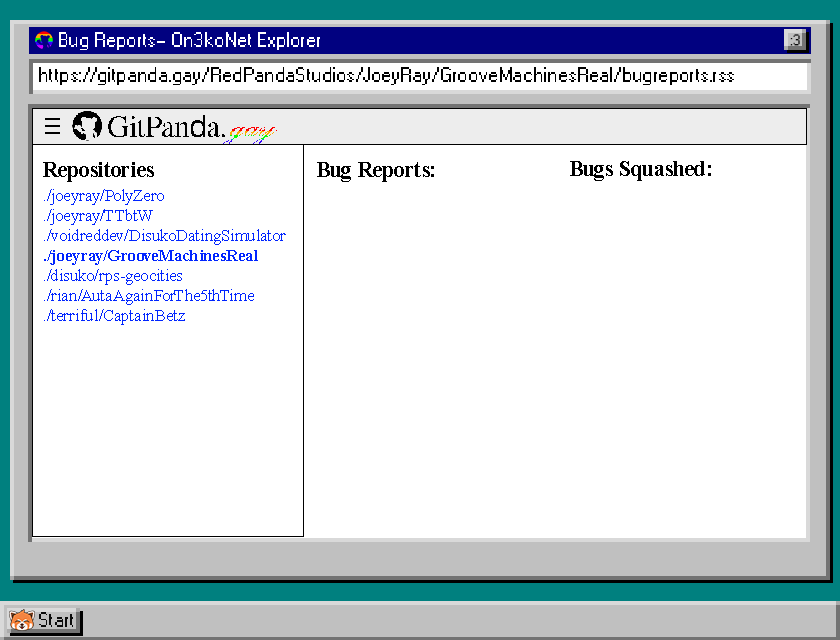
<style>
.page{position:relative;width:840px;height:640px;background:#ffffff}
.page>*{position:absolute;margin:0}
.t1{font:20.8px "W95FARegular";color:#ffffff}
.t2{font:15.1px "W95FARegular";color:#0b0b0b}
.t3{font:20.8px "W95FARegular";color:#000000}
.t4{font:21.7px "TimesNewRomanPS-BoldMT";color:#000000}
.t5{font:16.7px "TimesNewRomanPSMT";color:#0024ff}
.t6{font:16.7px "TimesNewRomanPS-BoldMT";color:#0024ff}
.t7{font:20.8px "W95FARegular";color:#0b0b0b}
</style>
<div class="page">
<p class="t1" style="left:59px;top:32px;width:261px;height:18px">Bug Reports- On3koNet Explorer</p>
<p class="t2" style="left:790px;top:34px;width:10px;height:12px">:3</p>
<p class="t3" style="left:39px;top:67px;width:695px;height:18px">https://gitpanda.gay/RedPandaStudios/JoeyRay/GrooveMachinesReal/bugreports.rss</p>
<p class="t4" style="left:570px;top:161px;width:141px;height:20px">Bugs Squashed:</p>
<p class="t4" style="left:43px;top:162px;width:111px;height:20px">Repositories</p>
<p class="t4" style="left:317px;top:162px;width:117px;height:20px">Bug Reports:</p>
<p class="t5" style="left:44px;top:189px;width:242px;height:136px">./joeyray/PolyZero<br>./joeyray/TTbtW<br>./voidreddev/DisukoDatingSimulator<br><span class="t6">./joeyray/GrooveMachinesReal<br></span>./disuko/rps-geocities<br>./rian/AutaAgainForThe5thTime<br>./terriful/CaptainBetz</p>
<p class="t7" style="left:39px;top:612px;width:34px;height:15px">Start</p>
</div>
